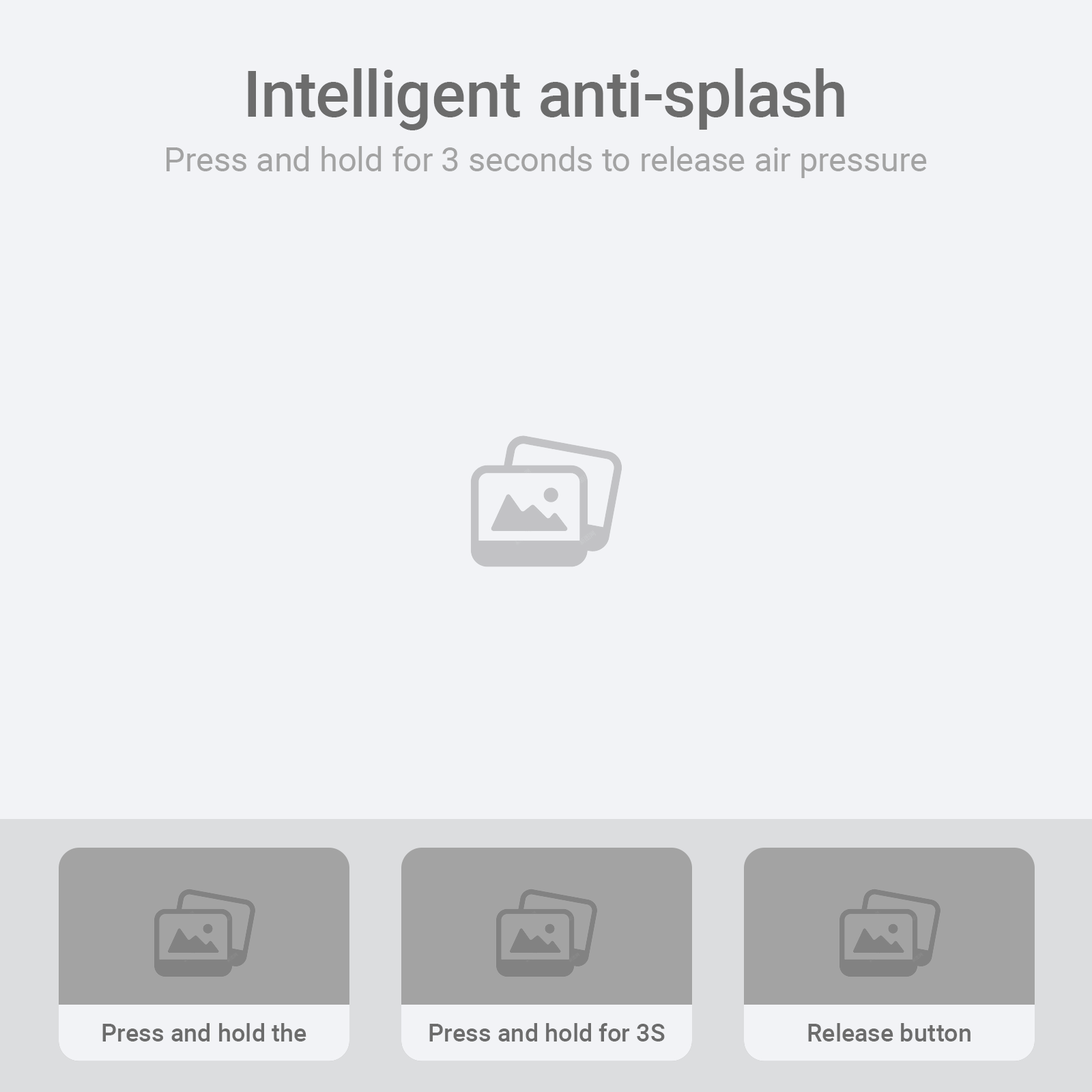
<style>
.page{position:relative;width:1092px;height:1092px;background:#f2f3f6}
.page>*{position:absolute;margin:0}
.t1{font:64.1px "Roboto-Medium";color:#6c6c6c}
.t2{font:33.5px "Roboto-Regular";color:#a3a3a3}
.t3{font:24.8px "Roboto-Medium";color:#6c6c6c}
</style>
<div class="page">
<p class="t1" style="left:248px;top:68px;width:596px;height:62px">Intelligent anti-splash</p>
<p class="t2" style="left:167px;top:146px;width:760px;height:32px">Press and hold for 3 seconds to release air pressure</p>
<p class="t3" style="left:102px;top:1023px;width:204px;height:18px">Press and hold the</p>
<p class="t3" style="left:429px;top:1023px;width:236px;height:18px">Press and hold for 3S</p>
<p class="t3" style="left:808px;top:1023px;width:163px;height:18px">Release button</p>
</div>
